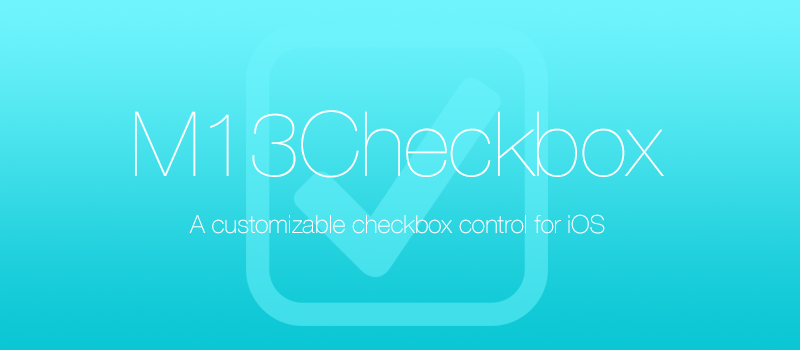
<style>
.page{position:relative;width:800px;height:350px}
.page>*{position:absolute;margin:0}
.t1{font:90px "HelveticaNeue-UltraLight";letter-spacing:-0.007em;color:#ffffff}
.t2{font:25px "HelveticaNeue-Thin";letter-spacing:-0.007em;color:#ffffff}
</style>
<div class="page">
<p class="t1" style="left:135px;top:110px;width:529px;height:68px">M13Checkbox</p>
<p class="t2" style="left:189px;top:214px;width:416px;height:20px">A customizable checkbox control for iOS</p>
</div>
